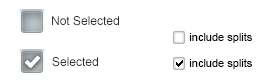
<style>
.page{position:relative;width:271px;height:84px;background:#ffffff}
.page>*{position:absolute;margin:0}
.t1{font:12px "ArialMT";color:#2e2e2e}
.t2{font:11px "ArialMT";color:#010101}
</style>
<div class="page">
<p class="t1" style="left:52px;top:16px;width:67px;height:10px">Not Selected</p>
<p class="t2" style="left:189px;top:33px;width:63px;height:10px">include splits</p>
<p class="t1" style="left:52px;top:57px;width:46px;height:10px">Selected</p>
<p class="t2" style="left:189px;top:59px;width:63px;height:10px">include splits</p>
</div>
